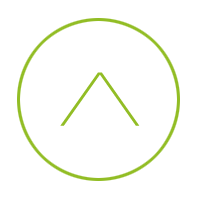
<style>
.page{position:relative;width:200px;height:200px;background:#ffffff}
.page>*{position:absolute;margin:0}
.t1{font:150px "HelveticaNeue-Regular";letter-spacing:-0.025em;color:#92bd25;scale:0.7 1}
</style>
<div class="page">
<p class="t1" style="left:60px;top:72px;width:80px;height:54px;rotate:-90deg">&gt;</p>
</div>
